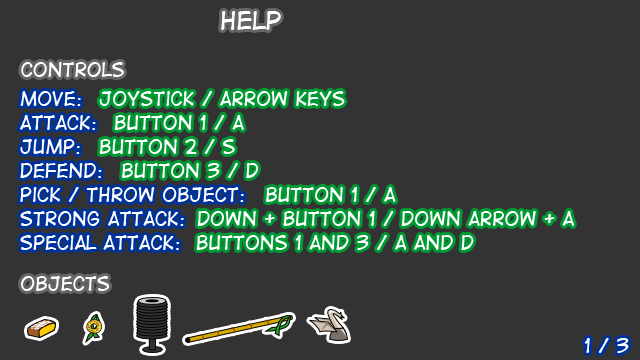
<style>
.page{position:relative;width:640px;height:360px;background:#333333}
.page>*{position:absolute;margin:0}
.t1{font:24px "DigitalStrip";color:#ffffff}
.t2{font:18px "DigitalStrip";color:#ffffff}
.t3{font:18px/24px "DigitalStrip";color:#ffffff}
</style>
<div class="page">
<p class="t1" style="left:221px;top:11px;width:60px;height:19px">help</p>
<p class="t2" style="left:21px;top:62px;width:103px;height:15px">controls</p>
<p class="t3" style="left:20px;top:91px;width:224px;height:159px">move:<br>attack:<br>jump:<br>Defend:<br>pick / throw object:<br>strong attack:<br>special attack:</p>
<p class="t3" style="left:99px;top:91px;width:475px;height:159px">joystick / arrow keys<br>     button 1 / a<br>   button 2 / S<br>      Button 3 / d<br>          Button 1 / A<br>                        down + button 1 / down arrow + a<br>                    buttons 1 and 3 / a and d</p>
<p class="t2" style="left:21px;top:276px;width:89px;height:15px">objects</p>
<p class="t2" style="left:584px;top:338px;width:45px;height:15px">1 / 3</p>
</div>
